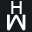
<style>
.page{position:relative;width:32px;height:32px;background:#151a1f}
.page>*{position:absolute;margin:0}
.t1{font:18px "ArialMT";color:#ffffff}
.t2{font:20px "Tele-Marines";color:#ffffff}
</style>
<div class="page">
<p class="t1" style="left:11px;top:1px;width:11px;height:13px">H</p>
<p class="t2" style="left:7px;top:14px;width:19px;height:17px">W</p>
</div>
